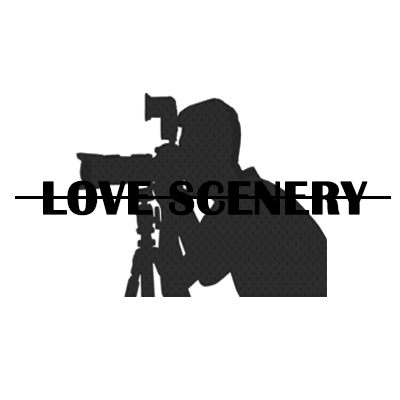
<style>
.page{position:relative;width:400px;height:400px;background:#ffffff}
.page>*{position:absolute;margin:0}
.t1{font:48px "BritannicBold";color:#000000;font-weight:bold}
</style>
<div class="page">
<p class="t1" style="left:43px;top:180px;width:325px;height:36px">LOVE SCENERY</p>
</div>
